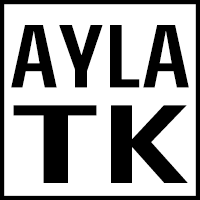
<style>
.page{position:relative;width:200px;height:200px;background:#ffffff}
.page>*{position:absolute;margin:0}
.t1{font:85.4px "StormSansStd";color:#000000}
.t2{font:106.2px "StormSansStd";color:#000000;scale:1.72 1}
.t3{font:106.4px "StormSansStd";color:#000000;scale:1.5 1}
</style>
<div class="page">
<p class="t1" style="left:11px;top:25px;width:178px;height:63px">AYLA</p>
<p class="t2" style="left:13px;top:105px;width:84px;height:78px">T</p>
<p class="t3" style="left:111px;top:105px;width:77px;height:78px">K</p>
</div>
